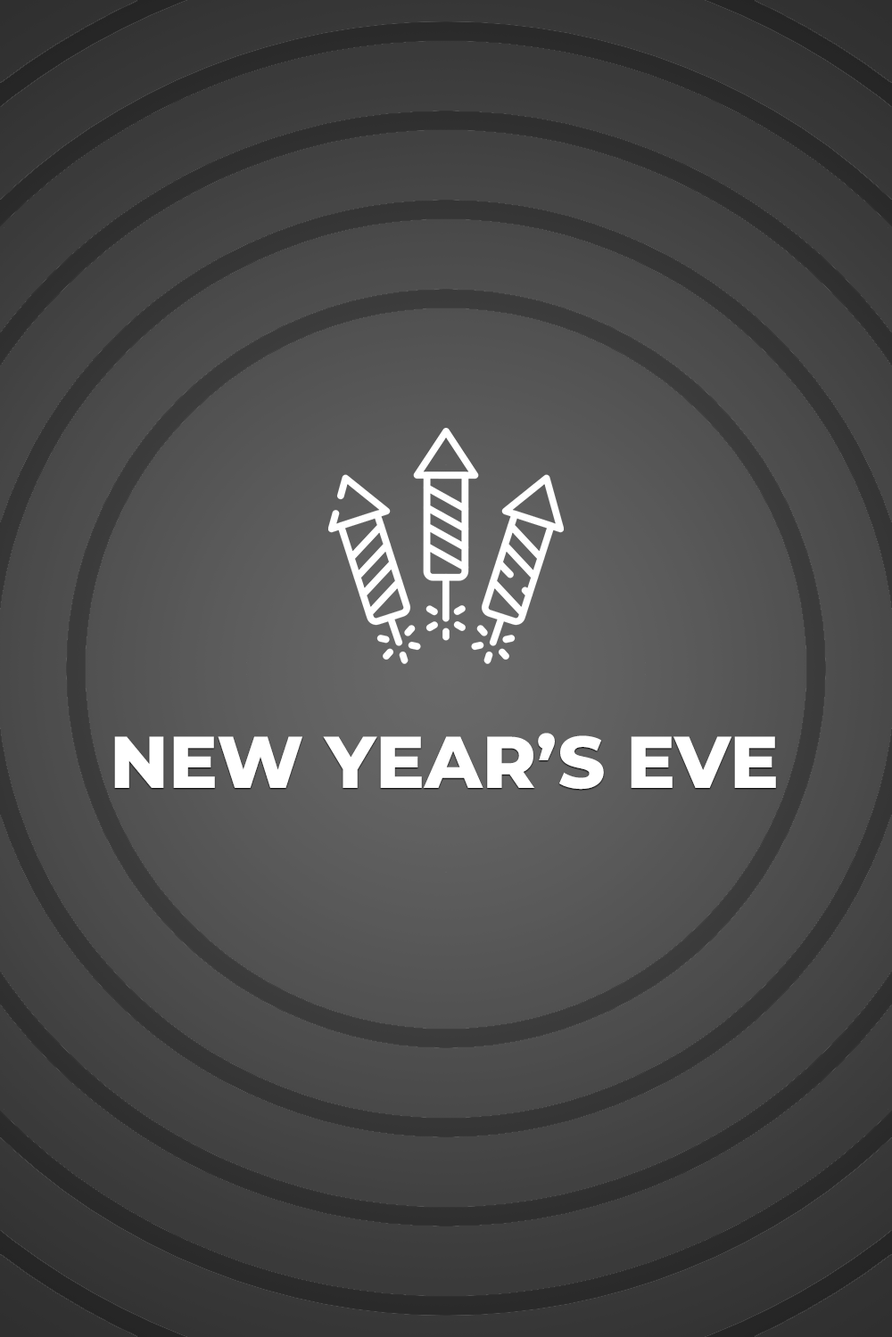
<style>
.page{position:relative;width:892px;height:1337px}
.page>*{position:absolute;margin:0}
.t1{font:73.1px "MontserratRoman-ExtraBold";color:#ffffff}
</style>
<div class="page">
<p class="t1" style="left:114px;top:733px;width:662px;height:57px">NEW YEAR’S EVE</p>
</div>
